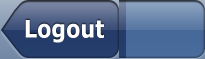
<style>
.page{position:relative;width:205px;height:59px}
.page>*{position:absolute;margin:0}
.t1{font:24px "Verdana-Bold";color:#ffffff;scale:0.87 1}
</style>
<div class="page">
<p class="t1" style="left:25px;top:20px;width:79px;height:23px">Logout</p>
</div>
